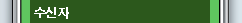
<style>
.page{position:relative;width:242px;height:23px;background:#2c581c}
.page>*{position:absolute;margin:0}
.t1{font:12px "H2gtrE";letter-spacing:-0.05em;color:#ffffff}
</style>
<div class="page">
<p class="t1" style="left:34px;top:7px;width:35px;height:12px">수신자</p>
</div>
